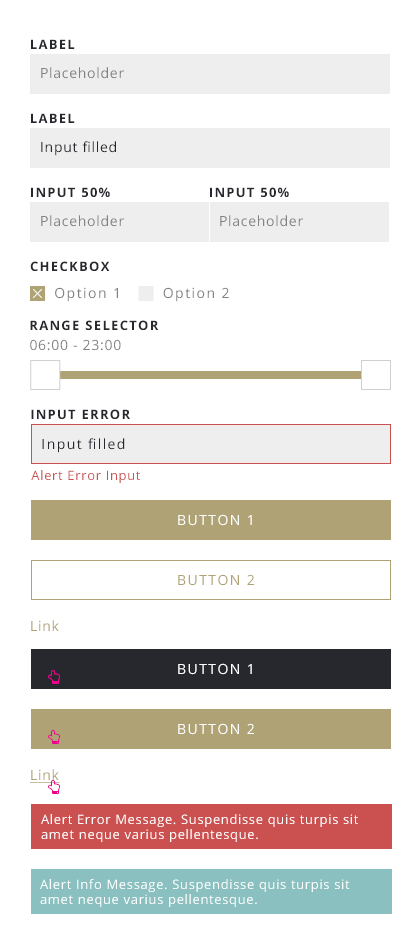
<style>
.page{position:relative;width:420px;height:951px;background:#ffffff}
.page>*{position:absolute;margin:0}
.t1{font:13px "OpenSans-Bold";letter-spacing:0.1em;color:#27282d;text-transform:uppercase}
.t2{font:14px "OpenSans";letter-spacing:0.05em;color:#828282}
.t3{font:14px "OpenSans";letter-spacing:0.05em;color:#27282d}
.t4{font:14px "OpenSans";letter-spacing:0.1em;color:#828282}
.t5{font:14px "OpenSans";letter-spacing:0.1em;color:#27282d}
.t6{font:13px "OpenSans";letter-spacing:0.05em;color:#cb5050}
.t7{font:14px "OpenSans";letter-spacing:0.1em;color:#ffffff;text-transform:uppercase}
.t8{font:14px "OpenSans";letter-spacing:0.1em;color:#afa376;text-transform:uppercase}
.t9{font:14px "OpenSans";letter-spacing:0.05em;color:#afa376}
.t10{font:14px "OpenSans";letter-spacing:0.05em;color:#afa376;text-decoration:underline}
.t11{font:13px/15px "OpenSans";letter-spacing:0.05em;color:#ffffff}
</style>
<div class="page">
<p class="t1" style="left:31px;top:39px;width:44px;height:10px">label</p>
<p class="t2" style="left:41px;top:67px;width:83px;height:12px">Placeholder</p>
<p class="t1" style="left:31px;top:113px;width:44px;height:10px">label</p>
<p class="t3" style="left:41px;top:141px;width:75px;height:15px">Input filled</p>
<p class="t1" style="left:31px;top:187px;width:79px;height:11px">input 50%</p>
<p class="t1" style="left:210px;top:187px;width:79px;height:11px">input 50%</p>
<p class="t2" style="left:41px;top:215px;width:83px;height:12px">Placeholder</p>
<p class="t2" style="left:220px;top:215px;width:83px;height:12px">Placeholder</p>
<p class="t1" style="left:30px;top:261px;width:80px;height:10px">checkbox</p>
<p class="t4" style="left:55px;top:287px;width:63px;height:15px">Option 1</p>
<p class="t4" style="left:163px;top:287px;width:66px;height:15px">Option 2</p>
<p class="t1" style="left:30px;top:320px;width:129px;height:10px">range selector</p>
<p class="t2" style="left:30px;top:339px;width:91px;height:12px">06:00 - 23:00</p>
<p class="t1" style="left:31px;top:409px;width:99px;height:11px">input error</p>
<p class="t5" style="left:42px;top:438px;width:83px;height:15px">Input filled</p>
<p class="t6" style="left:31px;top:470px;width:109px;height:13px">Alert Error Input</p>
<p class="t7" style="left:178px;top:514px;width:74px;height:12px">Button 1</p>
<p class="t8" style="left:178px;top:574px;width:76px;height:12px">Button 2</p>
<p class="t9" style="left:31px;top:620px;width:28px;height:11px">Link</p>
<p class="t7" style="left:178px;top:663px;width:74px;height:12px">Button 1</p>
<p class="t7" style="left:178px;top:723px;width:76px;height:12px">Button 2</p>
<p class="t10" style="left:30px;top:769px;width:30px;height:14px">Link</p>
<p class="t11" style="left:41px;top:814px;width:317px;height:28px">Alert Error Message. Suspendisse quis turpis sit amet neque varius pellentesque.</p>
<p class="t11" style="left:40px;top:879px;width:310px;height:28px">Alert Info Message. Suspendisse quis turpis sit amet neque varius pellentesque.</p>
</div>
